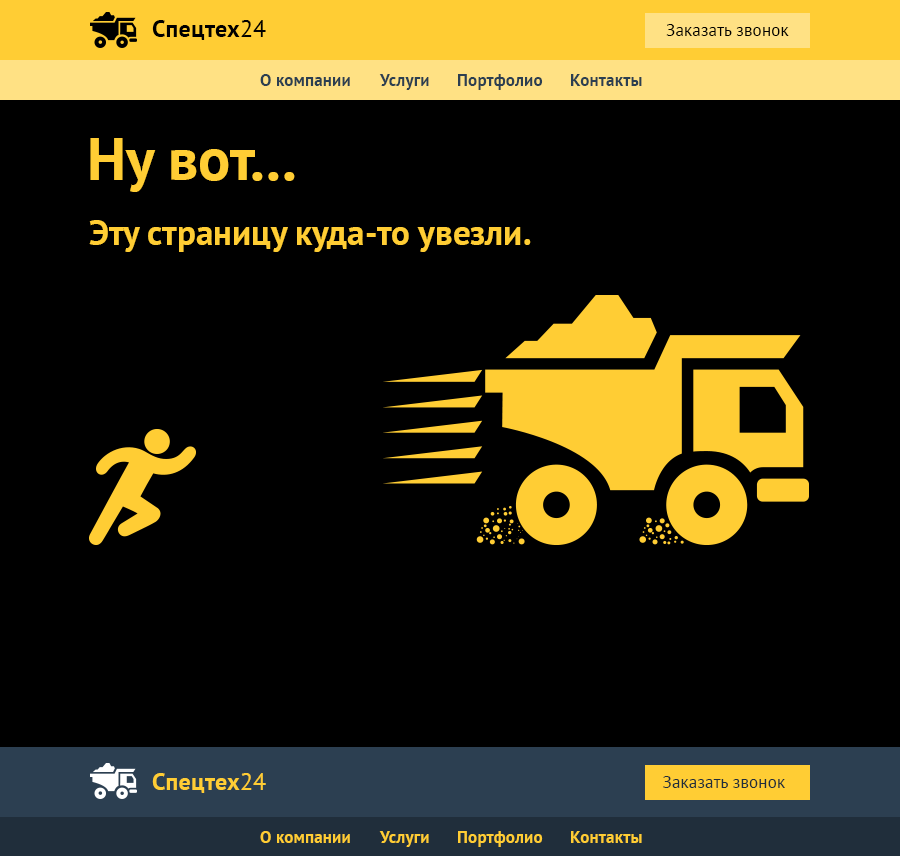
<style>
.page{position:relative;width:900px;height:856px;background:#000000}
.page>*{position:absolute;margin:0}
.t1{font:24px "PTSans-Bold";letter-spacing:0.01em;color:#000000}
.t2{font:24px "PTSans-Regular";letter-spacing:0.01em;color:#000000}
.t3{font:17px "PTSans-Regular";letter-spacing:0.01em;color:#000000}
.t4{font:17px "PTSans-Bold";letter-spacing:0.01em;color:#2c3f51}
.t5{font:60px "PTSans-Bold";color:#ffcd34}
.t6{font:35px "PTSans-Bold";color:#ffcd34}
.t7{font:24px "PTSans-Bold";letter-spacing:0.01em;color:#ffcd34}
.t8{font:24px "PTSans-Regular";letter-spacing:0.01em;color:#ffcd34}
.t9{font:17px "PTSans-Regular";letter-spacing:0.01em;color:#202e3b}
.t10{font:17px "PTSans-Bold";letter-spacing:0.01em;color:#ffcd34}
</style>
<div class="page">
<p class="t1" style="left:152px;top:20px;width:114px;height:20px">Спецтех<span class="t2">24</span></p>
<p class="t3" style="left:666px;top:24px;width:123px;height:12px">Заказать звонок</p>
<p class="t4" style="left:260px;top:74px;width:90px;height:12px">О компании</p>
<p class="t4" style="left:379px;top:74px;width:50px;height:16px">Услуги</p>
<p class="t4" style="left:458px;top:74px;width:85px;height:16px">Портфолио</p>
<p class="t4" style="left:571px;top:74px;width:71px;height:12px">Контакты</p>
<p class="t5" style="left:90px;top:138px;width:205px;height:54px">Ну вот...</p>
<p class="t6" style="left:89px;top:220px;width:442px;height:32px">Эту страницу куда-то увезли.</p>
<p class="t7" style="left:152px;top:773px;width:114px;height:20px">Спецтех<span class="t8">24</span></p>
<p class="t9" style="left:663px;top:776px;width:122px;height:12px">Заказать звонок</p>
<p class="t10" style="left:260px;top:831px;width:90px;height:12px">О компании</p>
<p class="t10" style="left:379px;top:831px;width:50px;height:16px">Услуги</p>
<p class="t10" style="left:458px;top:831px;width:85px;height:16px">Портфолио</p>
<p class="t10" style="left:571px;top:831px;width:71px;height:12px">Контакты</p>
</div>
